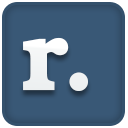
<style>
.page{position:relative;width:128px;height:128px;background:#395876}
.page>*{position:absolute;margin:0}
.t1{font:102px "TeXGyreBonum-Bold";color:#ffffff}
</style>
<div class="page">
<p class="t1" style="left:23px;top:37px;width:65px;height:54px">r.</p>
</div>
